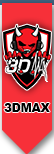
<style>
.page{position:relative;width:54px;height:154px;background:#f73039}
.page>*{position:absolute;margin:0}
.t1{font:11.7px "Arial-Black";letter-spacing:-0.01em;color:#000000}
</style>
<div class="page">
<p class="t1" style="left:4px;top:103px;width:46px;height:9px">3DMAX</p>
</div>
